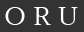
<style>
.page{position:relative;width:84px;height:32px;background:#333333}
.page>*{position:absolute;margin:0}
.t1{font:26px "YuMincho-Regular";color:#ffffff}
</style>
<div class="page">
<p class="t1" style="left:5px;top:7px;width:73px;height:18px">O R U</p>
</div>
